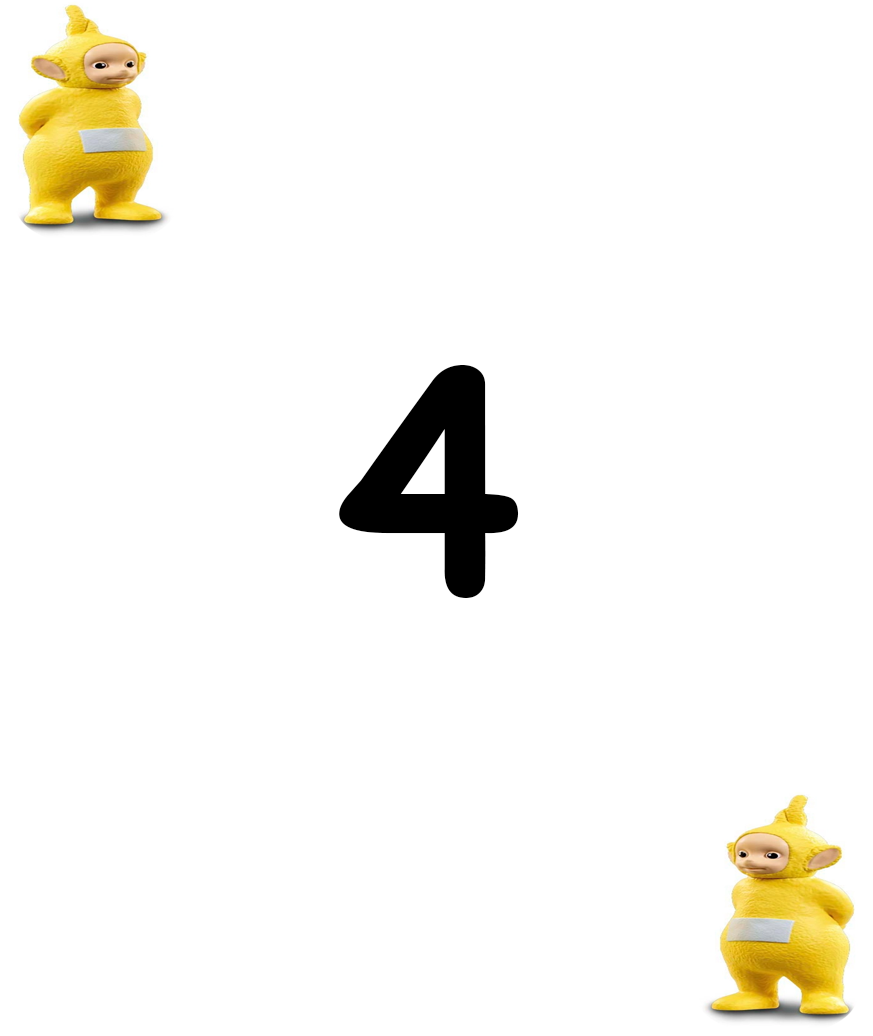
<style>
.page{position:relative;width:873px;height:1036px;background:#ffffff}
.page>*{position:absolute;margin:0}
.t1{font:300px "ComicSansMS-Bold";color:#000000;font-variant:small-caps}
</style>
<div class="page">
<p class="t1" style="left:339px;top:365px;width:180px;height:233px">4</p>
</div>
